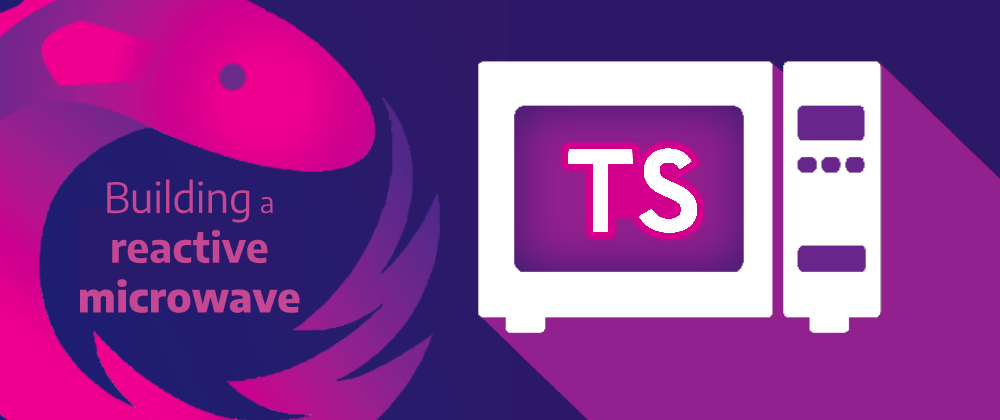
<style>
.page{position:relative;width:1000px;height:420px}
.page>*{position:absolute;margin:0}
.t1{font:41.5px "EncodeSans-ExtraBold";color:#c34792}
.t2{font:41.5px "EncodeSans-Regular";color:#c34792}
.t3{font:29px "EncodeSans-Regular";color:#c34792}
.t4{font:41.5px "EncodeSans-Bold";color:#c34792}
</style>
<div class="page">
<p class="t1" style="left:79px;top:179px;width:221px;height:134px;text-align:center"><span class="t2">Building </span><span class="t3">a<br></span><span class="t4">reactive<br></span>microwave</p>
</div>
